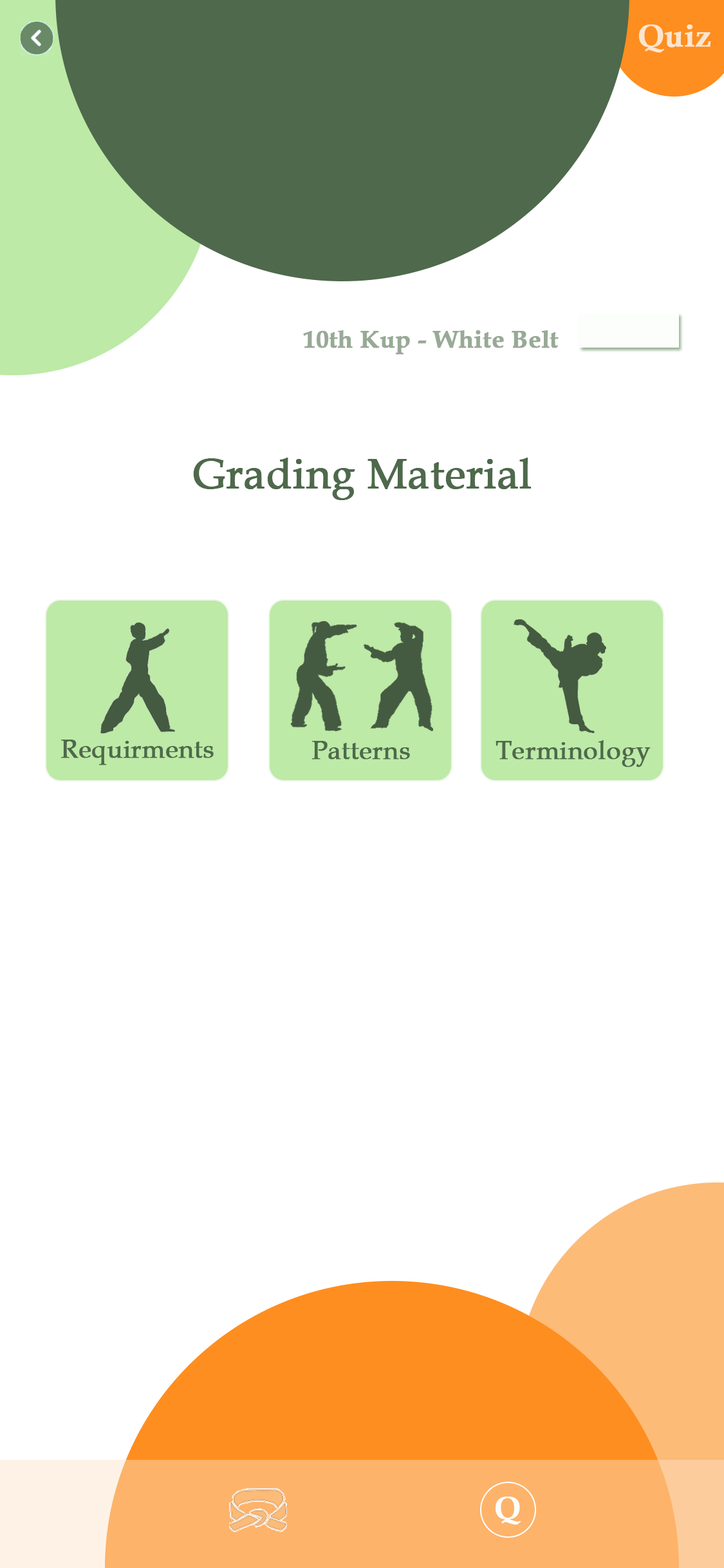
<style>
.page{position:relative;width:724px;height:1568px;background:#ffffff}
.page>*{position:absolute;margin:0}
.t1{font:30.9px "BookAntiqua-Bold";color:#fce5ce;font-weight:bold}
.t2{font:24.5px "BookAntiqua-Bold";color:#98aa96;font-weight:bold}
.t3{font:41.8px "BookAntiqua";color:#4e694b;font-weight:bold}
.t4{font:25.7px "BookAntiqua";color:#4e694b;font-weight:bold}
.t5{font:30.9px "BookAntiqua-Bold";color:#fefefd;font-weight:bold}
</style>
<div class="page">
<p class="t1" style="left:639px;top:24px;width:72px;height:29px">Quiz</p>
<p class="t2" style="left:303px;top:330px;width:256px;height:25px">10th Kup - White Belt</p>
<p class="t3" style="left:193px;top:458px;width:339px;height:42px">Grading Material</p>
<p class="t4" style="left:61px;top:740px;width:153px;height:25px">Requirments</p>
<p class="t4" style="left:312px;top:741px;width:98px;height:19px">Patterns</p>
<p class="t4" style="left:496px;top:740px;width:155px;height:27px">Terminology</p>
<p class="t5" style="left:495px;top:1497px;width:26px;height:28px">Q</p>
</div>
